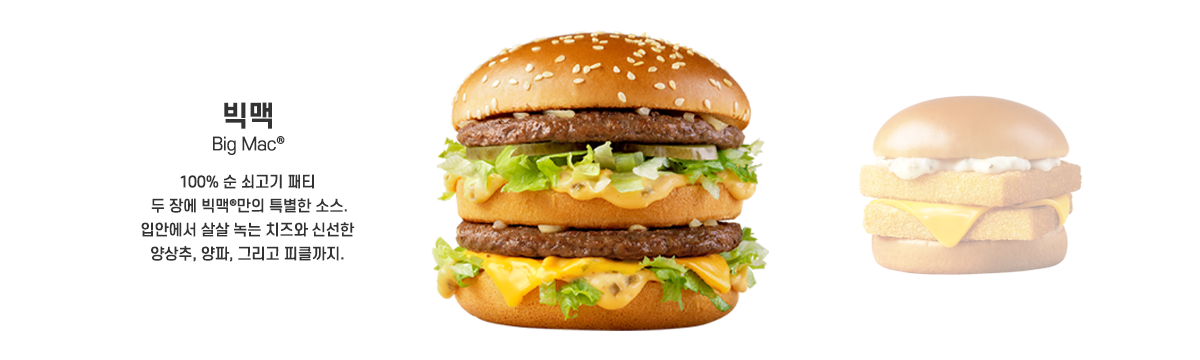
<style>
.page{position:relative;width:1200px;height:360px;background:#ffffff}
.page>*{position:absolute;margin:0}
.t1{font:17.5px/24px "S-CoreDream-4Regular";letter-spacing:-0.02em;color:#333333}
.t2{font:28px/24px "S-CoreDream-6Bold";letter-spacing:-0.02em;color:#333333}
.t3{font:15px/24px "S-CoreDream-5Medium";letter-spacing:-0.02em;color:#333333}
</style>
<div class="page">
<p class="t1" style="left:213px;top:102px;width:72px;height:53px;text-align:center"><span class="t2">빅맥<br></span>Big Mac®</p>
<p class="t3" style="left:141px;top:174px;width:214px;height:88px;text-align:center">100% 순 쇠고기 패티<br> 두 장에 빅맥®만의 특별한 소스.<br>입안에서 살살 녹는 치즈와 신선한<br>양상추, 양파, 그리고 피클까지.</p>
</div>
